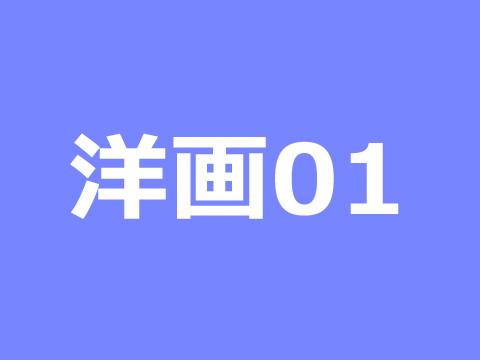
<style>
.page{position:relative;width:480px;height:360px;background:#7786ff}
.page>*{position:absolute;margin:0}
.t1{font:96px "Meiryo-Bold";color:#ffffff;scale:1.05 1}
</style>
<div class="page">
<p class="t1" style="left:70px;top:133px;width:329px;height:86px">洋画01</p>
</div>
